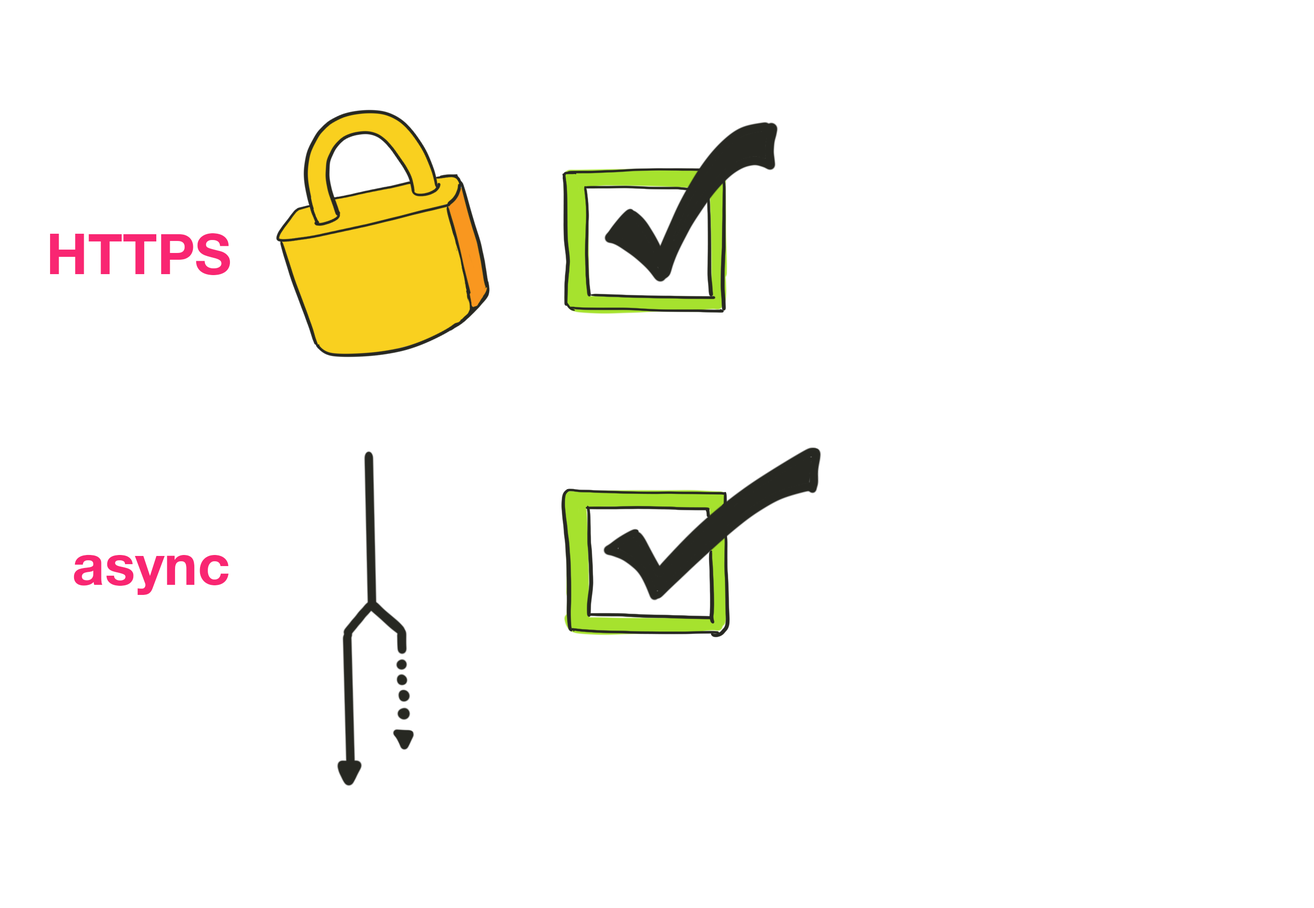
<style>
.page{position:relative;width:1314px;height:908px;background:#ffffff}
.page>*{position:absolute;margin:0}
.t1{font:56.4px "HelveticaNeue-Bold";color:#f92672}
</style>
<div class="page">
<p class="t1" style="left:50px;top:233px;width:180px;height:42px">HTTPS</p>
<p class="t1" style="left:74px;top:554px;width:155px;height:41px">async</p>
</div>
